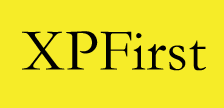
<style>
.page{position:relative;width:224px;height:108px;background:#f6ec28}
.page>*{position:absolute;margin:0}
.t1{font:60px "STFangsong";color:#000000}
</style>
<div class="page">
<p class="t1" style="left:22px;top:31px;width:184px;height:40px">XPFirst</p>
</div>
